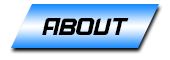
<style>
.page{position:relative;width:170px;height:60px;background:#ffffff}
.page>*{position:absolute;margin:0}
.t1{font:25px "Spantaran";color:#000000}
</style>
<div class="page">
<p class="t1" style="left:42px;top:18px;width:87px;height:17px">ABOUT</p>
</div>
